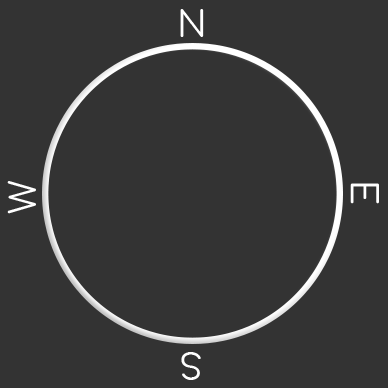
<style>
.page{position:relative;width:388px;height:388px;background:#333333}
.page>*{position:absolute;margin:0}
.t1{font:36px "Comfortaa-Regular";color:#ffffff}
</style>
<div class="page">
<p class="t1" style="left:180px;top:9px;width:24px;height:28px">N</p>
<p class="t1" style="left:7px;top:181px;width:29px;height:33px;rotate:-90deg">W</p>
<p class="t1" style="left:350px;top:183px;width:29px;height:21px;rotate:90deg">E</p>
<p class="t1" style="left:181px;top:352px;width:20px;height:28px;rotate:180deg">S</p>
</div>
